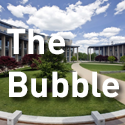
<style>
.page{position:relative;width:125px;height:125px}
.page>*{position:absolute;margin:0}
.t1{font:35.4px "DINOT-Bold";color:#ffffff}
</style>
<div class="page">
<p class="t1" style="left:7px;top:28px;width:112px;height:70px">The<br>Bubble</p>
</div>
